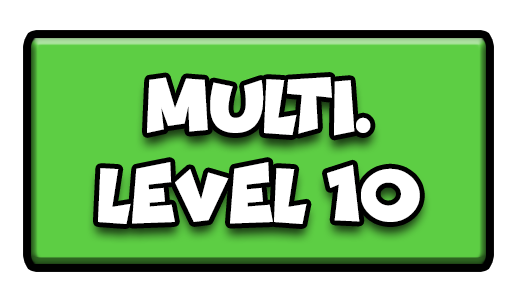
<style>
.page{position:relative;width:517px;height:301px;background:#ffffff}
.page>*{position:absolute;margin:0}
.t1{font:77.7px "Funhouse";color:#ffffff;scale:0.95 1}
</style>
<div class="page">
<p class="t1" style="left:147px;top:77px;width:224px;height:59px">MULTI.</p>
<p class="t1" style="left:98px;top:162px;width:322px;height:62px">LEVEL 10</p>
</div>
